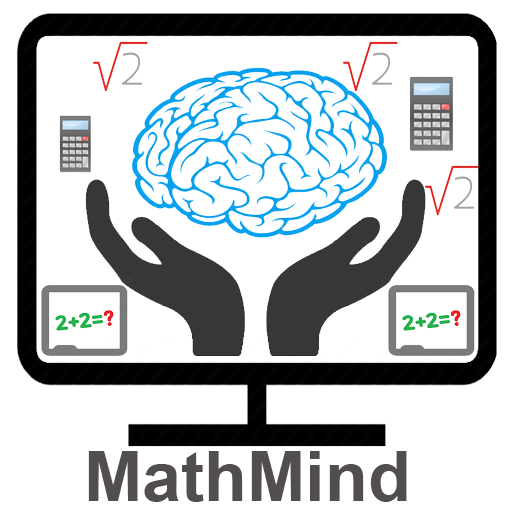
<style>
.page{position:relative;width:512px;height:512px;background:#ffffff}
.page>*{position:absolute;margin:0}
.t1{font:70px "Arial-BoldMT";color:#534e4e}
</style>
<div class="page">
<p class="t1" style="left:88px;top:451px;width:319px;height:51px">MathMind</p>
</div>
